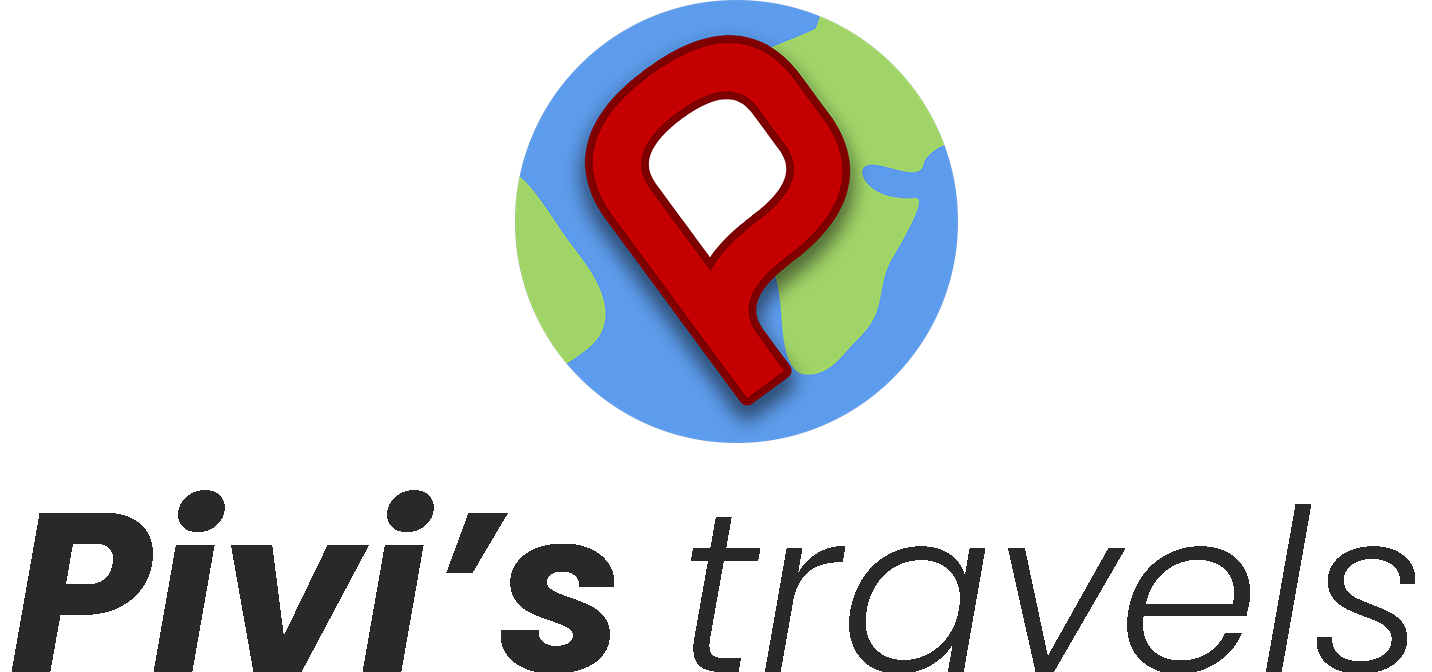
<style>
.page{position:relative;width:1432px;height:672px;background:#ffffff}
.page>*{position:absolute;margin:0}
.t1{font:227px "Poppins-LightItalic";color:#292929}
.t2{font:227px "Poppins-BoldItalic";color:#292929}
</style>
<div class="page">
<p class="t1" style="left:12px;top:490px;width:1403px;height:184px"><span class="t2">Pivi’s </span>travels</p>
</div>
